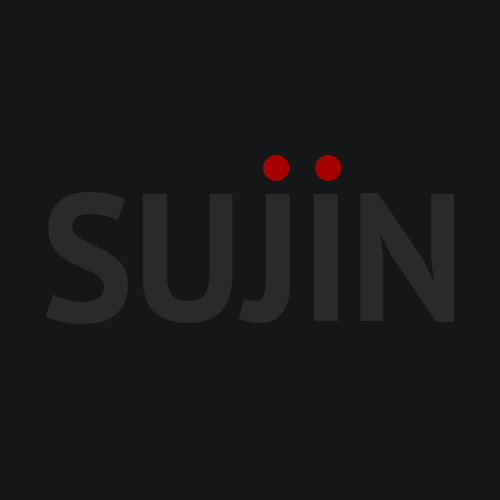
<style>
.page{position:relative;width:500px;height:500px;background:#161718}
.page>*{position:absolute;margin:0}
.t1{font:181.2px "PTSans-Bold";color:#27292b;scale:0.96 1}
</style>
<div class="page">
<p class="t1" style="left:45px;top:192px;width:409px;height:132px">SUJIN</p>
</div>
